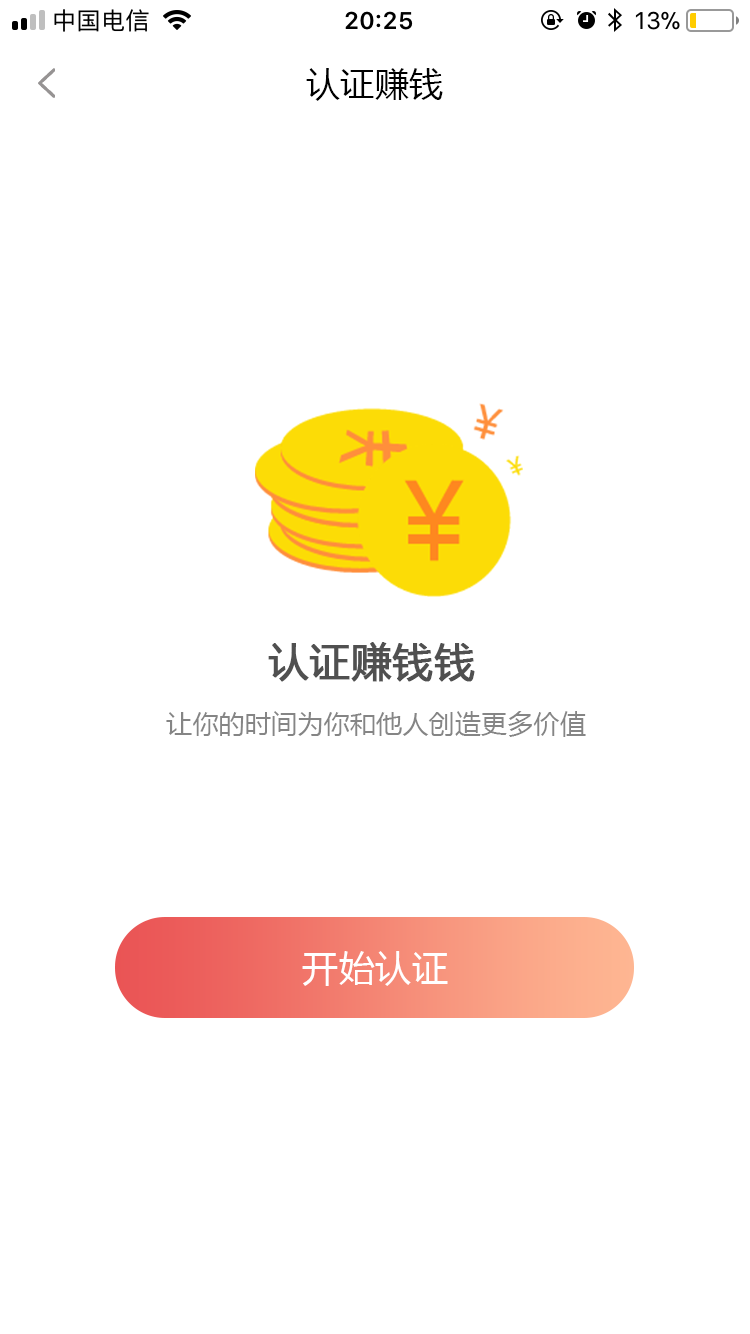
<style>
.page{position:relative;width:750px;height:1334px;background:#ffffff}
.page>*{position:absolute;margin:0}
.t1{font:34px "MicrosoftYaHei";letter-spacing:0.01em;color:#000000}
.t2{font:40px "MicrosoftYaHei";letter-spacing:0.01em;color:#505050;font-weight:bold}
.t3{font:26px "MicrosoftYaHei";letter-spacing:0.01em;color:#858585}
.t4{font:36px "MicrosoftYaHei";letter-spacing:0.01em;color:#ffffff}
</style>
<div class="page">
<p class="t1" style="left:306px;top:68px;width:137px;height:33px">认证赚钱</p>
<p class="t2" style="left:268px;top:642px;width:207px;height:40px">认证赚钱钱</p>
<p class="t3" style="left:166px;top:711px;width:420px;height:26px">让你的时间为你和他人创造更多价值</p>
<p class="t4" style="left:302px;top:951px;width:146px;height:35px">开始认证</p>
</div>
